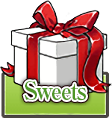
<style>
.page{position:relative;width:112px;height:118px;background:#ffffff}
.page>*{position:absolute;margin:0}
.t1{font:25px "RyuminPro-ExBold";letter-spacing:-0.08em;color:#4f9626;scale:0.9 1}
</style>
<div class="page">
<p class="t1" style="left:24px;top:81px;width:62px;height:20px">Sweets</p>
</div>
